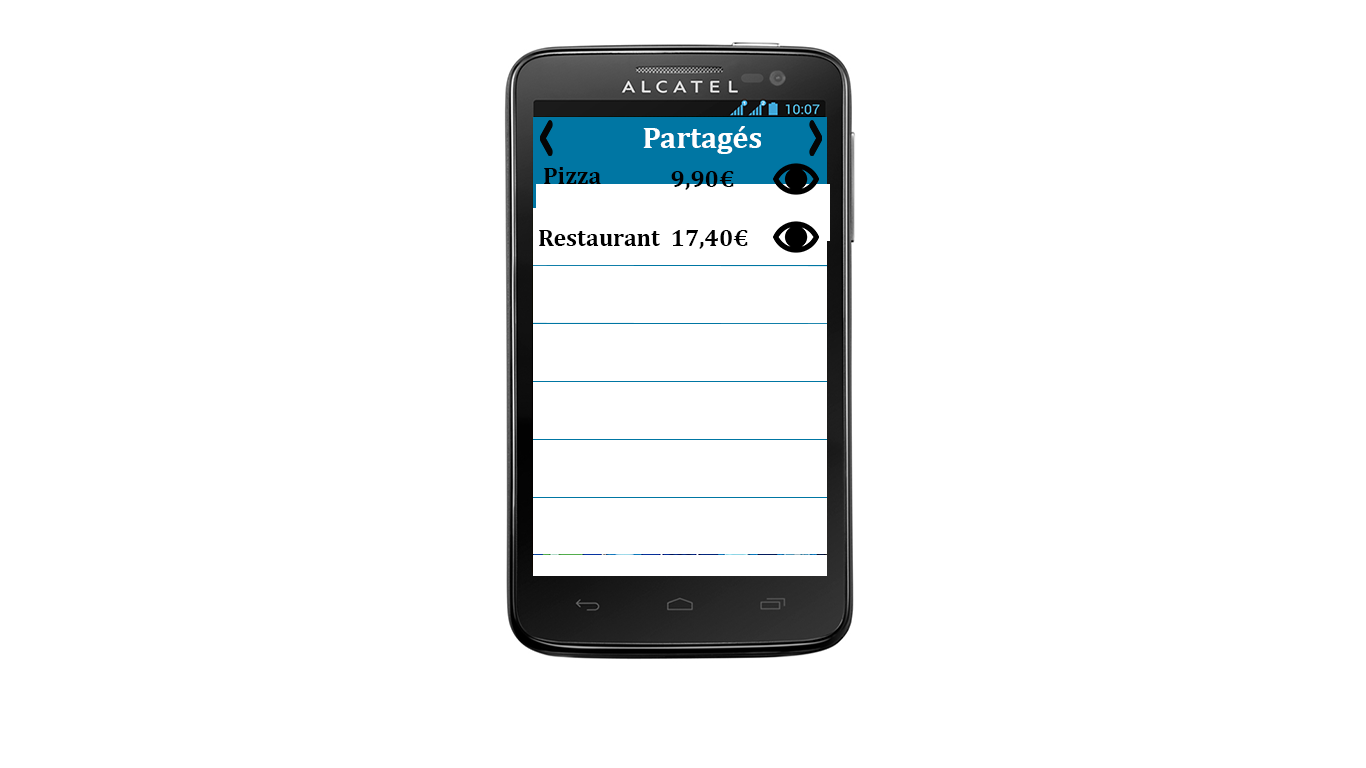
<style>
.page{position:relative;width:1366px;height:768px;background:#ffffff}
.page>*{position:absolute;margin:0}
.t1{font:30px "Cambria-Bold";color:#ffffff}
.t2{font:24px "Cambria-Bold";color:#000000}
</style>
<div class="page">
<p class="t1" style="left:643px;top:126px;width:118px;height:28px">Partagés</p>
<p class="t2" style="left:544px;top:167px;width:57px;height:17px">Pizza</p>
<p class="t2" style="left:671px;top:171px;width:63px;height:19px">9,90€</p>
<p class="t2" style="left:539px;top:230px;width:121px;height:16px">Restaurant</p>
<p class="t2" style="left:672px;top:230px;width:76px;height:19px">17,40€</p>
</div>
